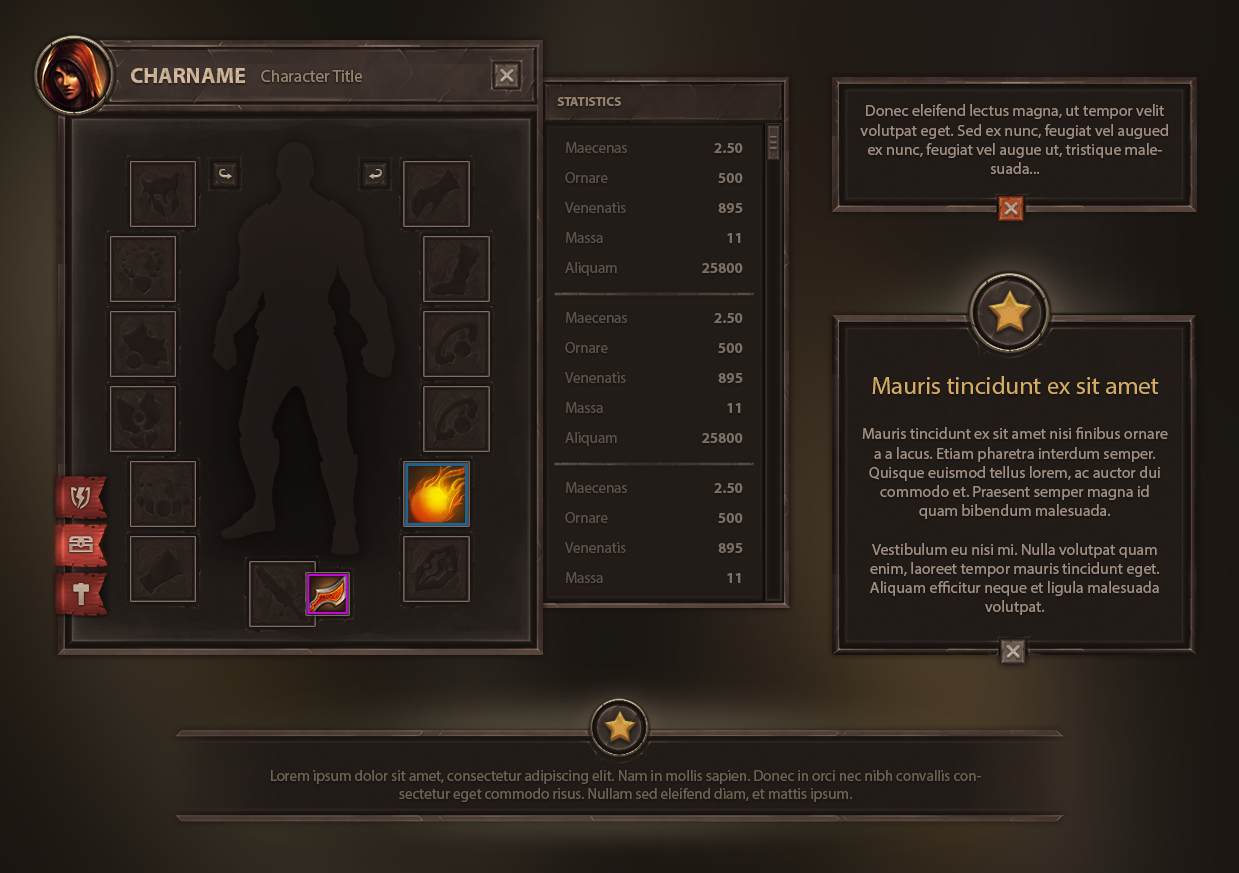
<style>
.page{position:relative;width:1239px;height:873px}
.page>*{position:absolute;margin:0}
.t1{font:22px "MyriadPro-Bold";color:#dbbc9b;text-transform:uppercase}
.t2{font:17px "MyriadPro-Regular";color:#958370}
.t3{font:13px "MyriadPro-Bold";color:#93816e;text-transform:uppercase}
.t4{font:16px "MyriadPro-Regular";color:#9f8e80}
.t5{font:15px/30px "MyriadPro-Regular";color:#5b5148}
.t6{font:15px/30px "MyriadPro-Bold";color:#7c6f64}
.t7{font:25px "MyriadPro-Regular";color:#d4ab63}
.t8{font:15px "MyriadPro-Regular";color:#6d6252}
</style>
<div class="page">
<p class="t1" style="left:131px;top:68px;width:114px;height:15px">charname</p>
<p class="t2" style="left:261px;top:70px;width:101px;height:12px">Character Title</p>
<p class="t3" style="left:557px;top:97px;width:64px;height:9px">Statistics</p>
<p class="t4" style="left:860px;top:104px;width:308px;height:70px;text-align:center">Donec eleifend lectus magna, ut tempor velit volutpat eget. Sed ex nunc, feugiat vel augued ex nunc, feugiat vel augue ut, tristique malesuada...</p>
<p class="t5" style="left:565px;top:142px;width:62px;height:134px">Maecenas<br>Ornare<br>Venenatis<br>Massa<br>Aliquam</p>
<p class="t6" style="left:702px;top:143px;width:41px;height:130px;text-align:right">2.50<br>500<br>895<br>11<br>25800</p>
<p class="t5" style="left:565px;top:312px;width:62px;height:134px">Maecenas<br>Ornare<br>Venenatis<br>Massa<br>Aliquam</p>
<p class="t6" style="left:702px;top:313px;width:41px;height:130px;text-align:right">2.50<br>500<br>895<br>11<br>25800</p>
<p class="t7" style="left:872px;top:376px;width:287px;height:18px">Mauris tincidunt ex sit amet</p>
<p class="t4" style="left:862px;top:427px;width:306px;height:188px;text-align:center">Mauris tincidunt ex sit amet nisi finibus ornare a a lacus. Etiam pharetra interdum semper. Quisque euismod tellus lorem, ac auctor dui commodo et. Praesent semper magna id quam bibendum malesuada. <br><br>Vestibulum eu nisi mi. Nulla volutpat quam enim, laoreet tempor mauris tincidunt eget. Aliquam efficitur neque et ligula malesuada volutpat.</p>
<p class="t5" style="left:565px;top:482px;width:62px;height:101px">Maecenas<br>Ornare<br>Venenatis<br>Massa</p>
<p class="t6" style="left:714px;top:483px;width:29px;height:100px;text-align:right">2.50<br>500<br>895<br>11</p>
<p class="t8" style="left:271px;top:770px;width:710px;height:32px;text-align:center">Lorem ipsum dolor sit amet, consectetur adipiscing elit. Nam in mollis sapien. Donec in orci nec nibh convallis consectetur eget commodo risus. Nullam sed eleifend diam, et mattis ipsum.</p>
</div>
